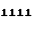
<style>
.page{position:relative;width:32px;height:32px;background:#ffffff}
.page>*{position:absolute;margin:0}
.t1{font:8px "PressStartK";color:#000000}
</style>
<div class="page">
<p class="t1" style="left:1px;top:8px;width:31px;height:9px">1111</p>
</div>
